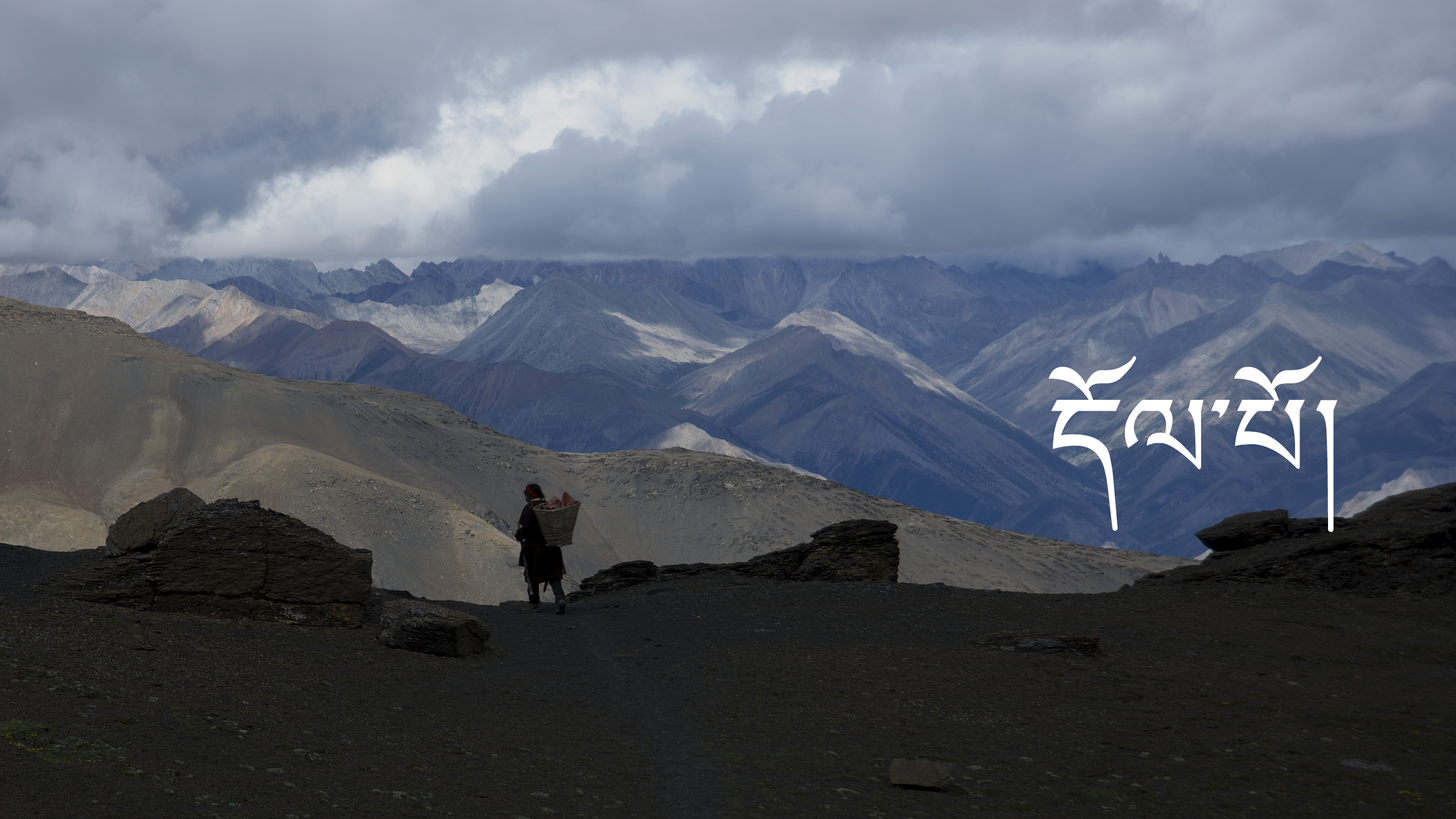
<style>
.page{position:relative;width:1456px;height:819px}
.page>*{position:absolute;margin:0}
.t1{font:170.6px "Amne";color:#ffffff}
</style>
<div class="page">
<p class="t1" style="left:1049px;top:356px;width:273px;height:175px">དོལ་པོ</p>
<p class="t1" style="left:1316px;top:400px;width:22px;height:132px">།</p>
</div>
